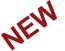
<style>
.page{position:relative;width:65px;height:51px;background:#ffffff}
.page>*{position:absolute;margin:0}
.t1{font:27px "Arial-BoldMT";letter-spacing:-0.015em;color:#90191c}
</style>
<div class="page">
<p class="t1" style="left:0px;top:0px;width:58px;height:51px;rotate:-36deg">NEW</p>
</div>
